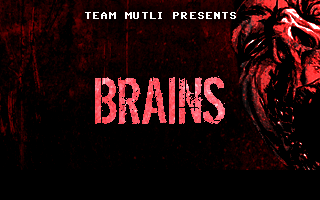
<style>
.page{position:relative;width:320px;height:200px;background:#000000}
.page>*{position:absolute;margin:0}
.t1{font:10px "Commodore64";color:#ffffff}
.t2{font:72px "DirtyEgo"}
</style>
<div class="page">
<p class="t1" style="left:85px;top:12px;width:151px;height:7px">TEAM MUTLI PRESENTS</p>
<p class="t2" style="left:95px;top:76px;width:130px;height:48px">BRAINS</p>
<p class="t2" style="left:95px;top:76px;width:130px;height:48px">BRAINS</p>
<p class="t2" style="left:95px;top:76px;width:130px;height:48px">BRAINS</p>
<p class="t2" style="left:95px;top:76px;width:130px;height:48px">BRAINS</p>
<p class="t2" style="left:95px;top:76px;width:130px;height:48px">BRAINS</p>
</div>
